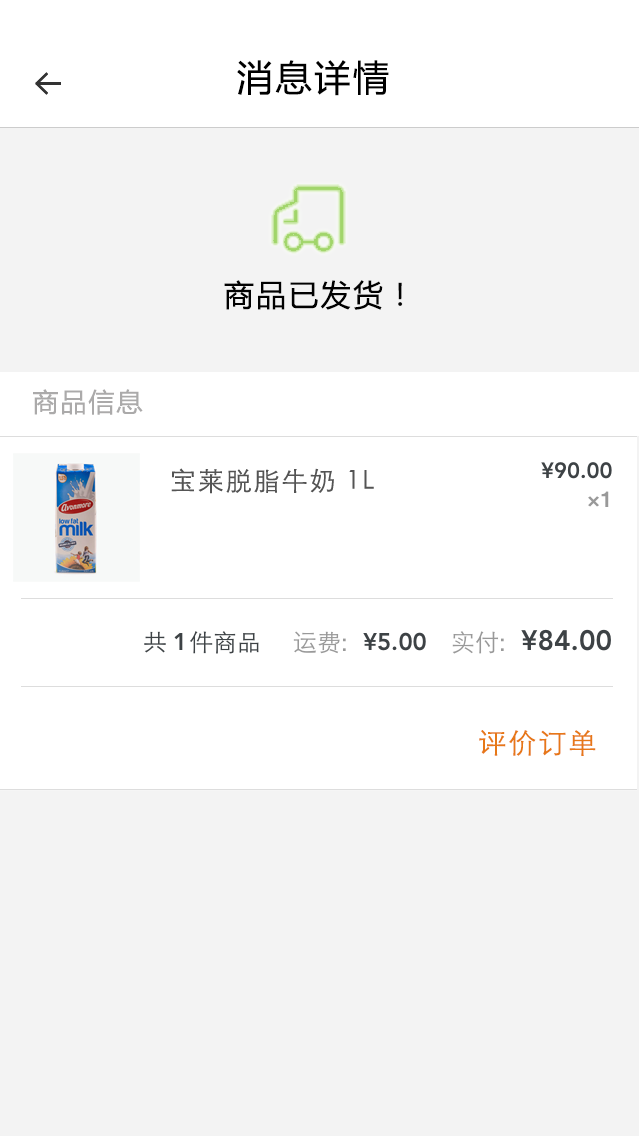
<style>
.page{position:relative;width:639px;height:1136px;background:#f3f3f3}
.page>*{position:absolute;margin:0}
.t1{font:36px "MicrosoftYaHei";letter-spacing:0.075em;color:#000000}
.t2{font:30px "MicrosoftYaHei";letter-spacing:0.075em;color:#010101}
.t3{font:26px "MicrosoftYaHei";letter-spacing:0.075em;color:#abaaaa}
.t4{font:26px "STXihei";letter-spacing:0.075em;color:#545454}
.t5{font:28px "STXihei";letter-spacing:0.075em;color:#e77817}
</style>
<div class="page">
<p class="t1" style="left:237px;top:60px;width:152px;height:36px">消息详情</p>
<p class="t2" style="left:224px;top:280px;width:179px;height:30px">商品已发货！</p>
<p class="t3" style="left:33px;top:389px;width:110px;height:26px">商品信息</p>
<p class="t4" style="left:171px;top:468px;width:203px;height:26px">宝莱脱脂牛奶 1L</p>
<p class="t5" style="left:479px;top:730px;width:117px;height:26px">评价订单</p>
</div>
